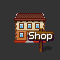
<style>
.page{position:relative;width:60px;height:60px;background:#333333}
.page>*{position:absolute;margin:0}
.t1{font:8px "PFTempestaSeven";color:#ffffff}
</style>
<div class="page">
<p class="t1" style="left:28px;top:31px;width:25px;height:10px">Shop</p>
</div>
